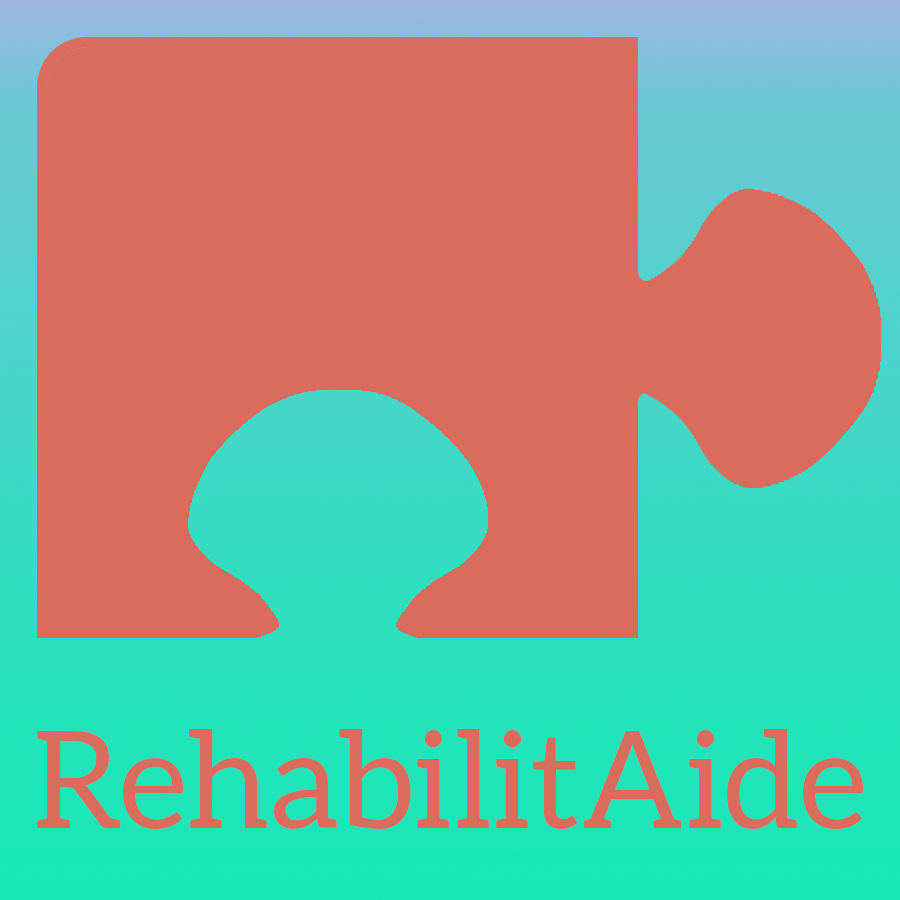
<style>
.page{position:relative;width:900px;height:900px;background:#db6b5c}
.page>*{position:absolute;margin:0}
.t1{font:135.4px "Aleo-Regular";color:#db6b5c}
</style>
<div class="page">
<p class="t1" style="left:37px;top:729px;width:826px;height:101px">RehabilitAide</p>
</div>
